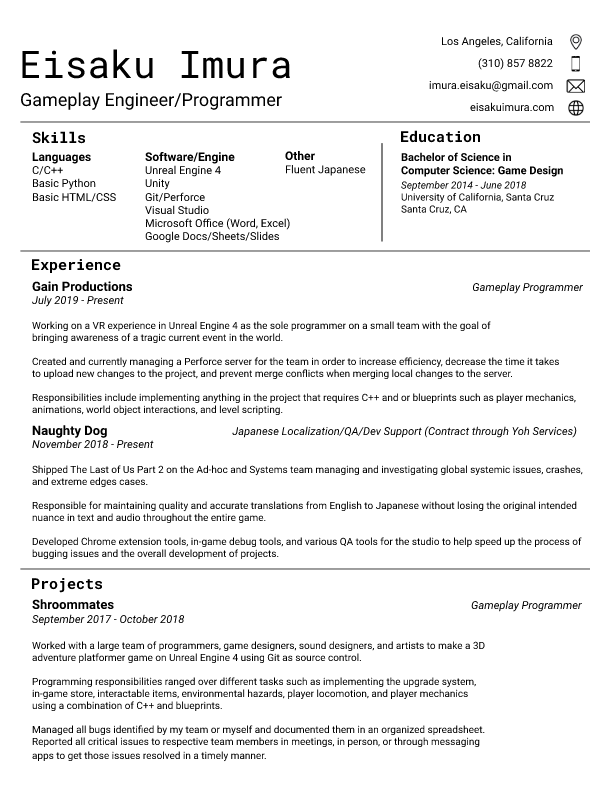
<style>
.page{position:relative;width:612px;height:792px;background:#ffffff}
.page>*{position:absolute;margin:0}
.t1{font:11px "Roboto-Regular";color:#000000}
.t2{font:38px "RobotoMono-Regular";color:#000000}
.t3{font:18px "Roboto-Regular";color:#000000}
.t4{font:15px "RobotoMono-Bold";color:#000000}
.t5{font:12px "Roboto-Bold";color:#000000}
.t6{font:11px "Roboto-Bold";color:#000000}
.t7{font:10px "Roboto-Italic";color:#000000}
.t8{font:10px "Roboto-Regular";color:#000000}
.t9{font:13px "Roboto-Bold";color:#000000}
.t10{font:11px "Roboto-Italic";color:#000000}
</style>
<div class="page">
<p class="t1" style="left:442px;top:36px;width:111px;height:12px">Los Angeles, California</p>
<p class="t2" style="left:22px;top:49px;width:268px;height:30px">Eisaku Imura</p>
<p class="t1" style="left:478px;top:58px;width:75px;height:12px">(310) 857 8822</p>
<p class="t1" style="left:429px;top:80px;width:124px;height:12px">imura.eisaku@gmail.com</p>
<p class="t3" style="left:21px;top:92px;width:261px;height:18px">Gameplay Engineer/Programmer</p>
<p class="t1" style="left:470px;top:102px;width:84px;height:9px">eisakuimura.com</p>
<p class="t4" style="left:32px;top:131px;width:53px;height:13px">Skills</p>
<p class="t4" style="left:401px;top:130px;width:79px;height:13px">Education</p>
<p class="t1" style="left:32px;top:152px;width:84px;height:50px"><span class="t5">Languages<br></span>C/C++<br>Basic Python<br>Basic HTML/CSS</p>
<p class="t1" style="left:145px;top:151px;width:145px;height:92px"><span class="t5">Software/Engine<br></span>Unreal Engine 4<br>Unity<br>Git/Perforce<br>Visual Studio<br>Microsoft Office (Word, Excel)<br>Google Docs/Sheets/Slides</p>
<p class="t1" style="left:285px;top:151px;width:81px;height:25px"><span class="t5">Other<br></span>Fluent Japanese</p>
<p class="t6" style="left:401px;top:152px;width:162px;height:63px">Bachelor of Science in <br>Computer Science: Game Design<br><span class="t7">September 2014 - June 2018<br></span><span class="t8">University of California, Santa Cruz<br>Santa Cruz, CA</span></p>
<p class="t4" style="left:32px;top:259px;width:89px;height:14px">Experience</p>
<p class="t8" style="left:32px;top:281px;width:552px;height:135px"><span class="t9">Gain Productions                                                                                                  </span><span class="t10">Gameplay Programmer<br>July 2019 - Present<br><br></span>Working on a VR experience in Unreal Engine 4 as the sole programmer on a small team with the goal of <br>bringing awareness of a tragic current event in the world.<br><br>Created and currently managing a Perforce server for the team in order to increase efficiency, decrease the time it takes<br>to upload new changes to the project, and prevent merge conflicts when merging local changes to the server.<br><br>Responsibilities include implementing anything in the project that requires C++ and or blueprints such as player mechanics, <br>animations, world object interactions, and level scripting.</p>
<p class="t8" style="left:32px;top:425px;width:551px;height:135px"><span class="t9">Naughty Dog                                    </span><span class="t10">Japanese Localization/QA/Dev Support (Contract through Yoh Services)<br>November 2018 - Present<br><br></span>Shipped The Last of Us Part 2 on the Ad-hoc and Systems team managing and investigating global systemic issues, crashes, <br>and extreme edges cases.<br><br>Responsible for maintaining quality and accurate translations from English to Japanese without losing the original intended <br>nuance in text and audio throughout the entire game.<br><br>Developed Chrome extension tools, in-game debug tools, and various QA tools for the studio to help speed up the process of<br>bugging issues and the overall development of projects.</p>
<p class="t4" style="left:32px;top:578px;width:70px;height:15px">Projects</p>
<p class="t8" style="left:32px;top:599px;width:550px;height:163px"><span class="t9">Shroommates                                                                                                       </span><span class="t10">Gameplay Programmer<br>September 2017 - October 2018<br><br></span>Worked with a large team of programmers, game designers, sound designers, and artists to make a 3D <br>adventure platformer game on Unreal Engine 4 using Git as source control.<br><br>Programming responsibilities ranged over different tasks such as implementing the upgrade system, <br>in-game store, interactable items, environmental hazards, player locomotion, and player mechanics <br>using a combination of C++ and blueprints.<br><br>Managed all bugs identified by my team or myself and documented them in an organized spreadsheet. <br>Reported all critical issues to respective team members in meetings, in person, or through messaging <br>apps to get those issues resolved in a timely manner.</p>
</div>
